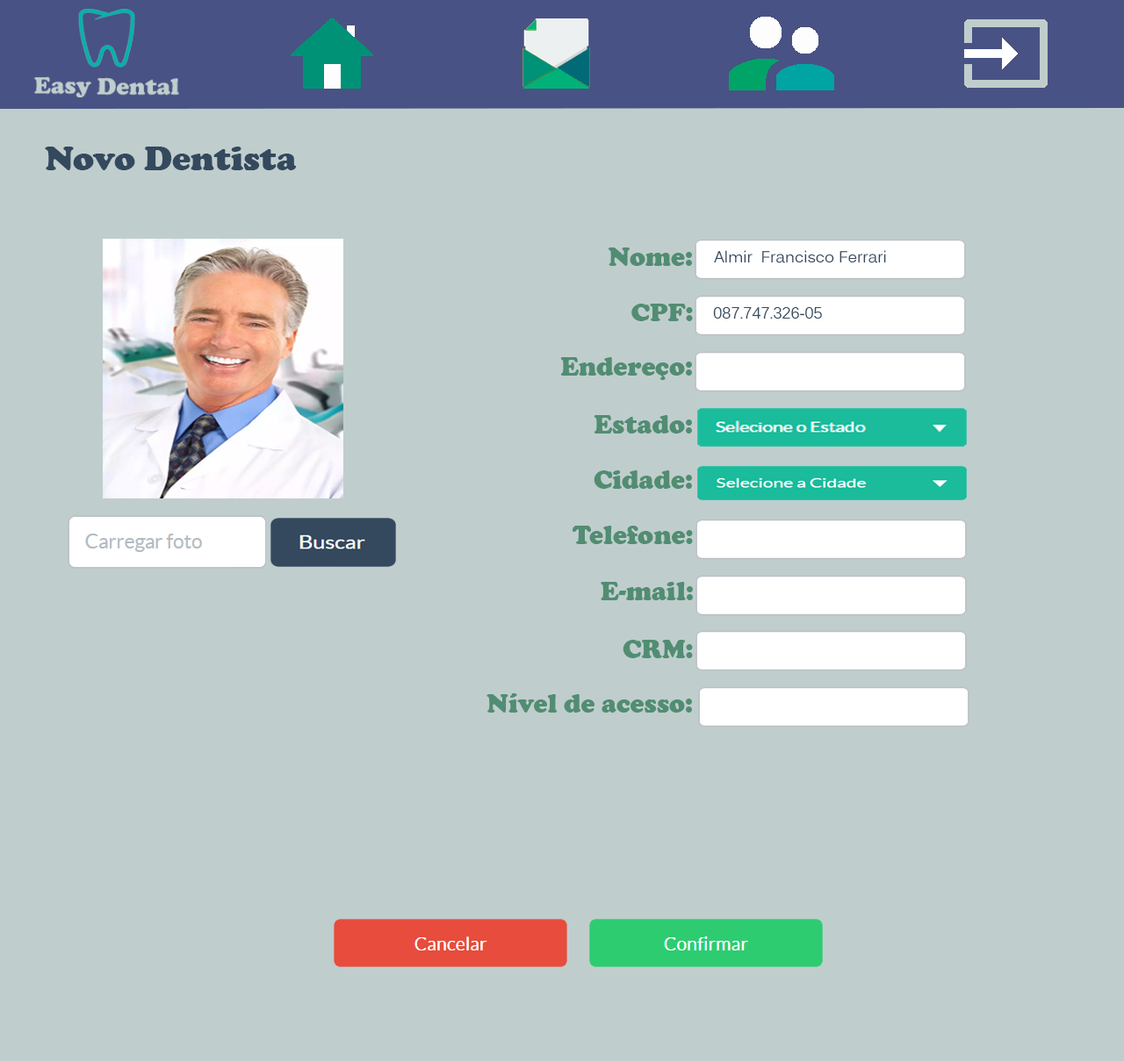
<style>
.page{position:relative;width:1124px;height:1061px;background:#c0cdcd}
.page>*{position:absolute;margin:0}
.t1{font:35.1px "CooperBlack";color:#34495e}
.t2{font:27.1px "CooperBlack";color:#518d72}
.t3{font:15.8px "Kalinga";color:#34495e}
.t4{font:26.3px "CooperBlack";color:#518d72}
</style>
<div class="page">
<p class="t1" style="left:45px;top:147px;width:252px;height:23px">Novo Dentista</p>
<p class="t2" style="left:607px;top:248px;width:85px;height:18px">Nome:</p>
<p class="t3" style="left:714px;top:250px;width:172px;height:13px">Almir  Francisco Ferrari</p>
<p class="t4" style="left:631px;top:304px;width:62px;height:17px">CPF:</p>
<p class="t3" style="left:713px;top:307px;width:109px;height:13px">087.747.326-05</p>
<p class="t2" style="left:560px;top:357px;width:132px;height:23px">Endereço:</p>
<p class="t2" style="left:593px;top:415px;width:99px;height:19px">Estado:</p>
<p class="t2" style="left:593px;top:471px;width:99px;height:18px">Cidade:</p>
<p class="t2" style="left:572px;top:526px;width:121px;height:18px">Telefone:</p>
<p class="t2" style="left:600px;top:582px;width:93px;height:18px">E-mail:</p>
<p class="t2" style="left:622px;top:640px;width:71px;height:18px">CRM:</p>
<p class="t2" style="left:486px;top:693px;width:206px;height:20px">Nível de acesso:</p>
</div>
